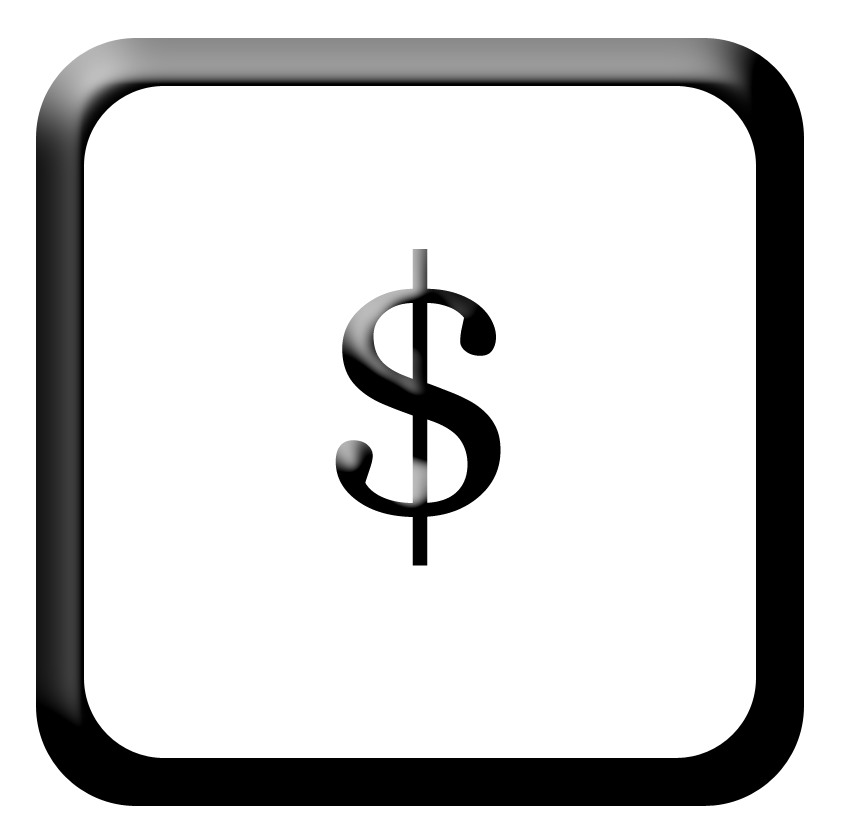
<style>
.page{position:relative;width:844px;height:836px;background:#ffffff}
.page>*{position:absolute;margin:0}
.t1{font:355.6px "Georgia";color:#000000}
</style>
<div class="page">
<p class="t1" style="left:335px;top:249px;width:166px;height:317px">$</p>
</div>
